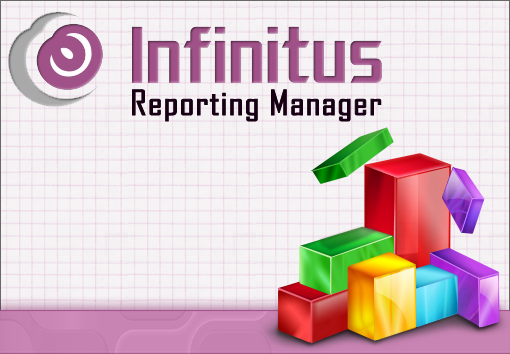
<style>
.page{position:relative;width:510px;height:354px}
.page>*{position:absolute;margin:0}
.t1{font:33px "AgencyFB-Reg";color:#170014;font-weight:bold;scale:1.19 1}
</style>
<div class="page">
<p class="t1" style="left:132px;top:89px;width:250px;height:33px">Reporting Manager</p>
</div>
